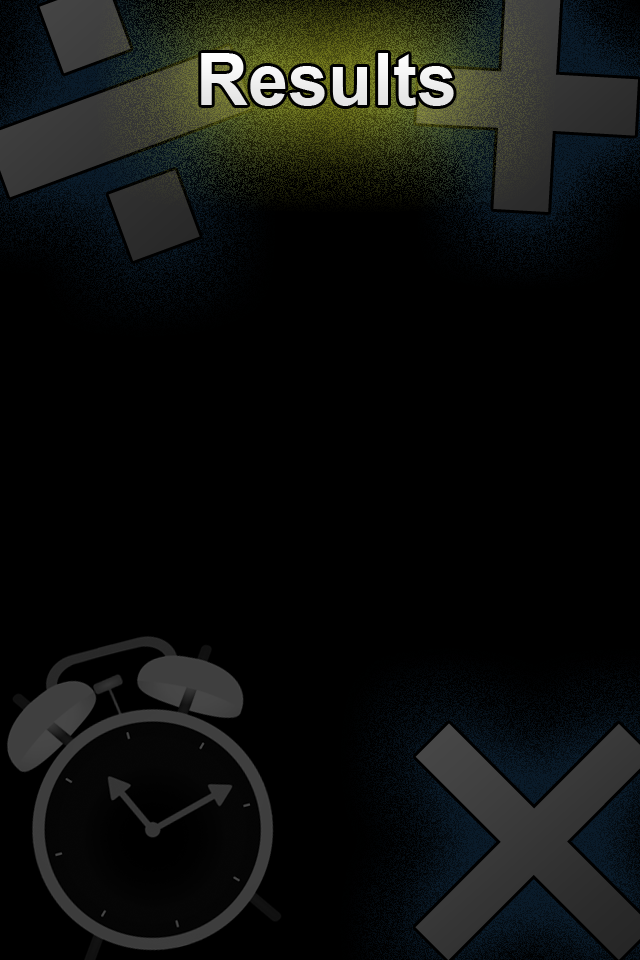
<style>
.page{position:relative;width:640px;height:960px;background:#000000}
.page>*{position:absolute;margin:0}
.t1{font:72.4px "Arial-BoldMT";color:#ffffff}
</style>
<div class="page">
<p class="t1" style="left:201px;top:53px;width:253px;height:53px">Results</p>
</div>
